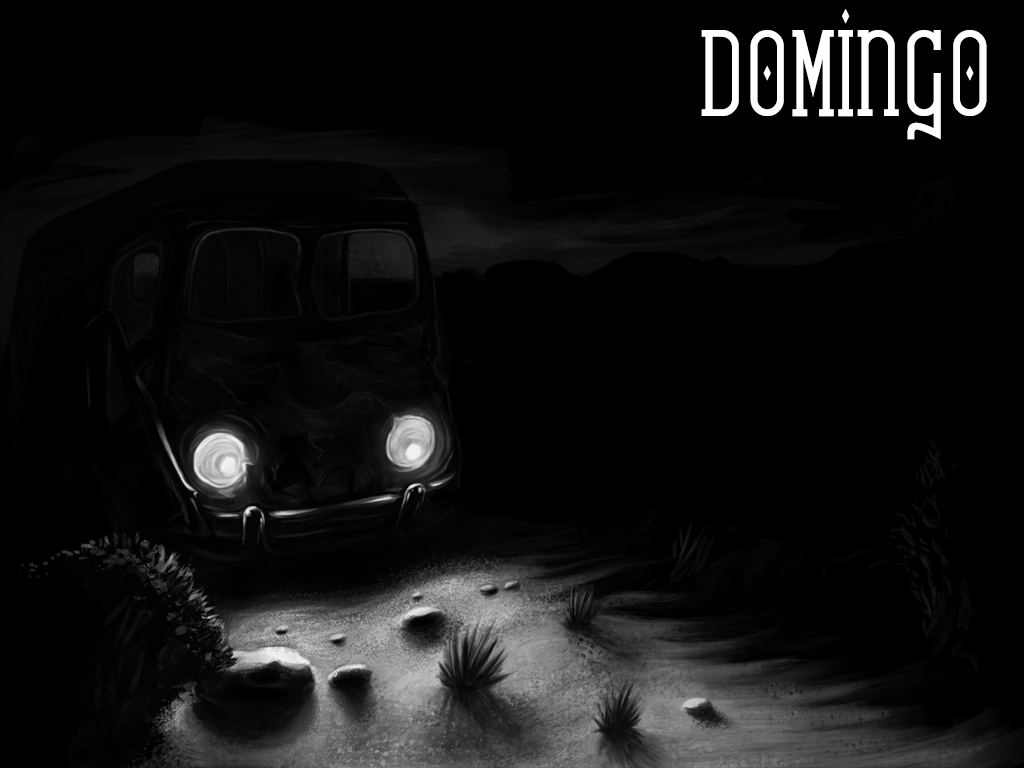
<style>
.page{position:relative;width:1024px;height:768px;background:#000000}
.page>*{position:absolute;margin:0}
.t1{font:132px "CatharsisRequiemBold";letter-spacing:-0.003em;color:#ffffff}
</style>
<div class="page">
<p class="t1" style="left:701px;top:9px;width:286px;height:131px">domingo</p>
</div>
